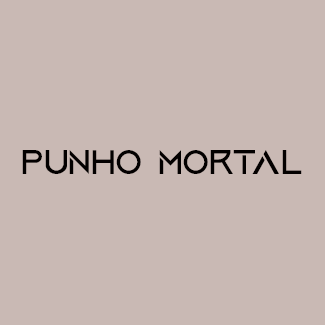
<style>
.page{position:relative;width:325px;height:325px;background:#c9b9b4}
.page>*{position:absolute;margin:0}
.t1{font:36px "AquireRegular";color:#030000}
</style>
<div class="page">
<p class="t1" style="left:22px;top:150px;width:280px;height:24px">Punho Mortal</p>
</div>
